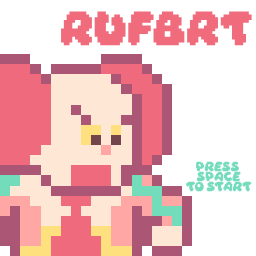
<style>
.page{position:relative;width:256px;height:256px;background:#ffffff}
.page>*{position:absolute;margin:0}
.t1{font:29.9px "Daydream";color:#f06c7c}
.t2{font:8.5px "Daydream";color:#74dcbc}
</style>
<div class="page">
<p class="t1" style="left:61px;top:11px;width:191px;height:35px">RUFBRT</p>
<p class="t2" style="left:186px;top:161px;width:66px;height:31px;text-align:center">press <br>space<br>to start</p>
</div>
